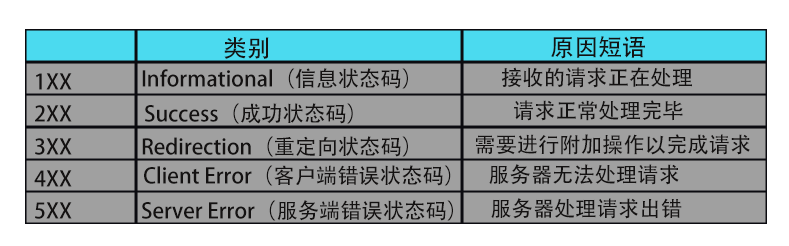
<style>
.page{position:relative;width:789px;height:246px;background:#a0a0a0}
.page>*{position:absolute;margin:0}
.t1{font:24px "AdobeHeitiStd-Regular";color:#141212}
.t2{font:21.3px "AdobeHeitiStd-Regular";color:#141212}
</style>
<div class="page">
<p class="t1" style="left:224px;top:37px;width:45px;height:22px">类别</p>
<p class="t1" style="left:551px;top:36px;width:94px;height:23px">原因短语</p>
<p class="t2" style="left:36px;top:73px;width:36px;height:17px">1XX</p>
<p class="t2" style="left:142px;top:68px;width:266px;height:21px">Informational（信息状态码）</p>
<p class="t2" style="left:501px;top:67px;width:191px;height:21px">接收的请求正在处理</p>
<p class="t2" style="left:514px;top:100px;width:169px;height:21px">请求正常处理完毕</p>
<p class="t2" style="left:35px;top:105px;width:37px;height:17px">2XX</p>
<p class="t2" style="left:145px;top:103px;width:208px;height:21px">Success（成功状态码）</p>
<p class="t2" style="left:142px;top:136px;width:266px;height:21px">Redirection（重定向状态码）</p>
<p class="t2" style="left:476px;top:134px;width:274px;height:21px">需要进行附加操作以完成请求</p>
<p class="t2" style="left:35px;top:138px;width:37px;height:17px">3XX</p>
<p class="t2" style="left:34px;top:170px;width:38px;height:17px">4XX</p>
<p class="t2" style="left:144px;top:165px;width:307px;height:21px">Client Error（客户端错误状态码）</p>
<p class="t2" style="left:489px;top:164px;width:190px;height:21px">服务器无法处理请求</p>
<p class="t2" style="left:491px;top:198px;width:191px;height:21px">服务器处理请求出错</p>
<p class="t2" style="left:35px;top:202px;width:37px;height:17px">5XX</p>
<p class="t2" style="left:142px;top:200px;width:311px;height:21px">Server Error（服务端错误状态码）</p>
</div>
